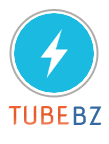
<style>
.page{position:relative;width:109px;height:144px;background:#ffffff}
.page>*{position:absolute;margin:0}
.t1{font:25px "NovaFlat";color:#eb6131}
.t2{font:25px "NovaFlat";color:#356aa0}
</style>
<div class="page">
<p class="t1" style="left:8px;top:105px;width:61px;height:20px">TUBE</p>
<p class="t2" style="left:73px;top:106px;width:29px;height:19px">BZ</p>
</div>
